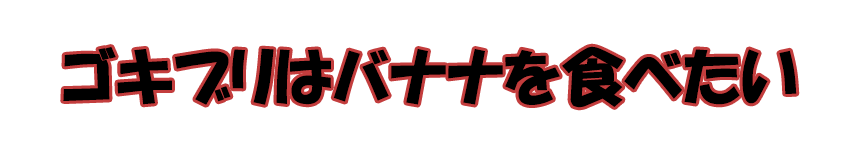
<style>
.page{position:relative;width:854px;height:149px;background:#ffffff}
.page>*{position:absolute;margin:0}
.t1{font:62.4px "HGPSoeiKakupoptai";color:#000000}
</style>
<div class="page">
<p class="t1" style="left:63px;top:46px;width:734px;height:62px">ゴキブリはバナナを食べたい</p>
</div>
